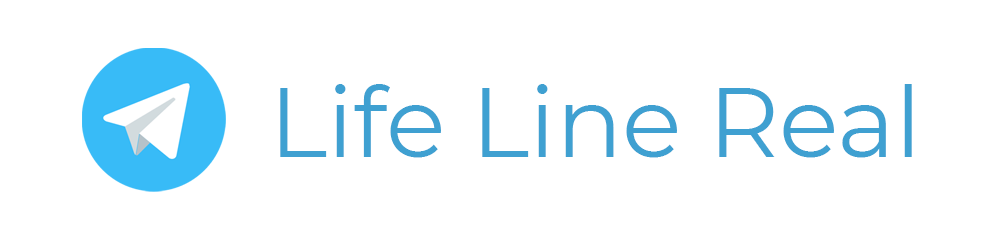
<style>
.page{position:relative;width:997px;height:240px;background:#ffffff}
.page>*{position:absolute;margin:0}
.t1{font:98.5px "Montserrat-Regular";color:#3fa0d1}
</style>
<div class="page">
<p class="t1" style="left:280px;top:84px;width:632px;height:74px">Life Line Real</p>
</div>
